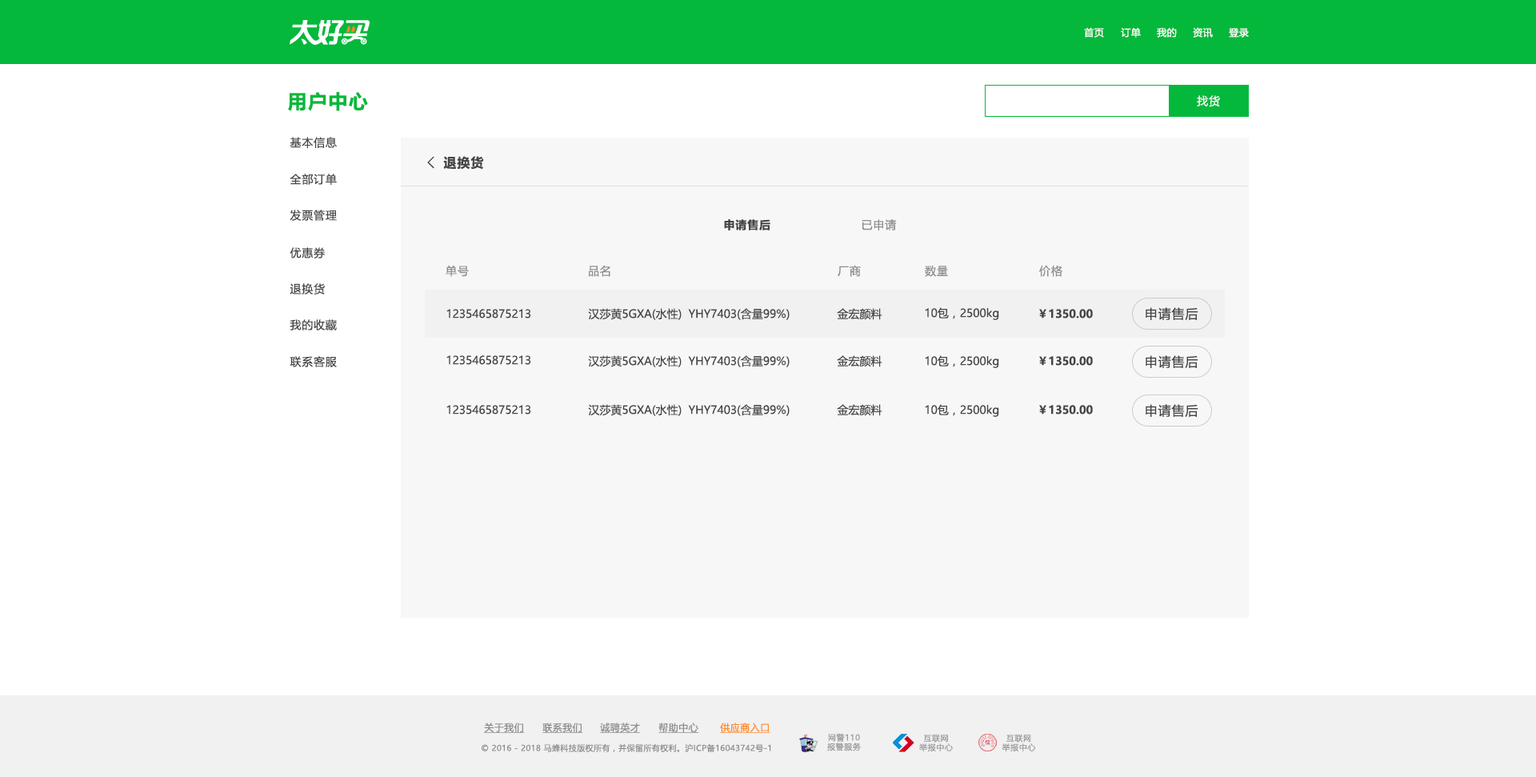
<style>
.page{position:relative;width:1536px;height:777px;background:#ffffff}
.page>*{position:absolute;margin:0}
.t1{font:9.6px "MicrosoftYaHeiUI";letter-spacing:0.04em;color:#ffffff}
.t2{font:19.2px "MicrosoftYaHeiUI-Bold";letter-spacing:0.06em;color:#04b83b}
.t3{font:11.2px "MicrosoftYaHei";letter-spacing:0.06em;color:#f7f7f7}
.t4{font:11.2px "MicrosoftYaHeiUI";letter-spacing:0.06em;color:#444444}
.t5{font:16px "FangSong";color:#444444;font-weight:bold}
.t6{font:12.8px "MicrosoftYaHeiUI-Bold";letter-spacing:0.06em;color:#444444}
.t7{font:11.2px "MicrosoftYaHeiUI-Bold";letter-spacing:0.06em;color:#444444}
.t8{font:11.2px "MicrosoftYaHeiUI";letter-spacing:0.06em;color:#8c8c8c}
.t9{font:11.2px "MicrosoftYaHeiUI";color:#444444}
.t10{font:11.2px "MicrosoftYaHeiUI-Bold";color:#444444}
.t11{font:12.8px "MicrosoftYaHeiUI";letter-spacing:0.06em;color:#444444}
.t12{font:9.6px "MicrosoftYaHeiUI";letter-spacing:0.04em;color:#8c8c8c;text-decoration:underline}
.t13{font:9.6px "MicrosoftYaHeiUI";letter-spacing:0.04em;color:#ff8b25;text-decoration:underline}
.t14{font:8px/9.3px "MicrosoftYaHei";letter-spacing:0.06em;color:#999999}
.t15{font:8px "MicrosoftYaHeiUI";letter-spacing:0.04em;color:#8c8c8c}
</style>
<div class="page">
<p class="t1" style="left:1084px;top:27px;width:20px;height:11px">首页</p>
<p class="t1" style="left:1120px;top:27px;width:20px;height:11px">订单</p>
<p class="t1" style="left:1156px;top:27px;width:20px;height:11px">我的</p>
<p class="t1" style="left:1192px;top:27px;width:20px;height:11px">资讯</p>
<p class="t1" style="left:1228px;top:28px;width:20px;height:10px">登录</p>
<p class="t2" style="left:288px;top:92px;width:80px;height:19px">用户中心</p>
<p class="t3" style="left:1196px;top:95px;width:24px;height:12px">找货</p>
<p class="t4" style="left:290px;top:137px;width:47px;height:11px">基本信息</p>
<p class="t5" style="left:427px;top:156px;width:7px;height:13px">&lt;</p>
<p class="t6" style="left:443px;top:156px;width:41px;height:14px">退换货</p>
<p class="t4" style="left:290px;top:174px;width:47px;height:11px">全部订单</p>
<p class="t4" style="left:290px;top:210px;width:47px;height:11px">发票管理</p>
<p class="t7" style="left:724px;top:219px;width:46px;height:11px">申请售后</p>
<p class="t8" style="left:861px;top:219px;width:36px;height:11px">已申请</p>
<p class="t4" style="left:290px;top:247px;width:35px;height:11px">优惠券</p>
<p class="t8" style="left:445px;top:265px;width:24px;height:12px">单号</p>
<p class="t8" style="left:589px;top:265px;width:21px;height:12px">品名</p>
<p class="t8" style="left:837px;top:265px;width:24px;height:12px">厂商</p>
<p class="t8" style="left:925px;top:265px;width:23px;height:12px">数量</p>
<p class="t8" style="left:1039px;top:265px;width:23px;height:12px">价格</p>
<p class="t4" style="left:290px;top:283px;width:35px;height:11px">退换货</p>
<p class="t9" style="left:446px;top:309px;width:85px;height:9px">1235465875213</p>
<p class="t9" style="left:588px;top:308px;width:201px;height:12px">汉莎黄5GXA(水性)  YHY7403(含量99%)</p>
<p class="t9" style="left:837px;top:308px;width:45px;height:12px">金宏颜料</p>
<p class="t9" style="left:925px;top:307px;width:74px;height:13px">10包，2500kg</p>
<p class="t10" style="left:1039px;top:309px;width:53px;height:9px">￥1350.00</p>
<p class="t11" style="left:1145px;top:307px;width:53px;height:13px">申请售后</p>
<p class="t4" style="left:290px;top:319px;width:47px;height:11px">我的收藏</p>
<p class="t4" style="left:290px;top:356px;width:47px;height:11px">联系客服</p>
<p class="t9" style="left:446px;top:355px;width:85px;height:10px">1235465875213</p>
<p class="t9" style="left:588px;top:355px;width:201px;height:12px">汉莎黄5GXA(水性)  YHY7403(含量99%)</p>
<p class="t9" style="left:837px;top:355px;width:45px;height:12px">金宏颜料</p>
<p class="t9" style="left:925px;top:355px;width:74px;height:13px">10包，2500kg</p>
<p class="t10" style="left:1039px;top:356px;width:53px;height:9px">￥1350.00</p>
<p class="t11" style="left:1145px;top:355px;width:53px;height:13px">申请售后</p>
<p class="t9" style="left:446px;top:405px;width:85px;height:9px">1235465875213</p>
<p class="t9" style="left:588px;top:404px;width:201px;height:12px">汉莎黄5GXA(水性)  YHY7403(含量99%)</p>
<p class="t9" style="left:837px;top:404px;width:45px;height:12px">金宏颜料</p>
<p class="t9" style="left:925px;top:404px;width:74px;height:13px">10包，2500kg</p>
<p class="t10" style="left:1039px;top:405px;width:53px;height:9px">￥1350.00</p>
<p class="t11" style="left:1145px;top:404px;width:53px;height:13px">申请售后</p>
<p class="t12" style="left:484px;top:722px;width:41px;height:11px">关于我们</p>
<p class="t12" style="left:542px;top:722px;width:41px;height:11px">联系我们</p>
<p class="t12" style="left:600px;top:722px;width:41px;height:11px">诚聘英才</p>
<p class="t12" style="left:658px;top:722px;width:41px;height:11px">帮助中心</p>
<p class="t13" style="left:720px;top:722px;width:50px;height:11px">供应商入口</p>
<p class="t14" style="left:827px;top:733px;width:34px;height:18px;text-align:center">网警110<br>报警服务</p>
<p class="t14" style="left:919px;top:733px;width:34px;height:18px;text-align:center">互联网<br>举报中心</p>
<p class="t14" style="left:1001px;top:733px;width:35px;height:18px;text-align:center">互联网<br>举报中心</p>
<p class="t15" style="left:481px;top:743px;width:290px;height:9px">© 2016 - 2018 马蜂科技版权所有，并保留所有权利。沪ICP备16043742号-1</p>
</div>
